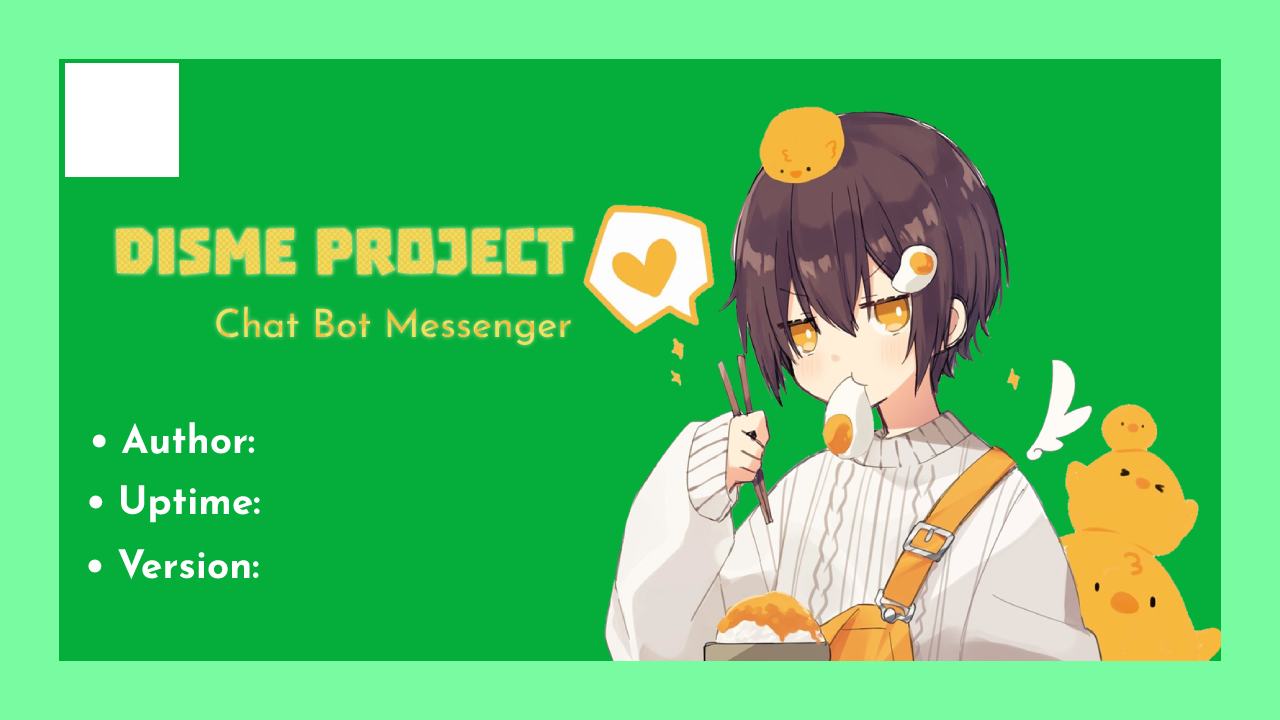
<style>
.page{position:relative;width:1280px;height:720px;background:#05ad3a}
.page>*{position:absolute;margin:0}
.t1{font:73px "Troika";color:#eed255}
.t2{font:39px "JosefinSans-Regular"}
.t3{font:39px "JosefinSans-Bold";color:#ffffff}
</style>
<div class="page">
<p class="t1" style="left:116px;top:227px;width:457px;height:49px">DISME PROJECT</p>
<p class="t2" style="left:216px;top:306px;width:355px;height:40px">Chat Bot Messenger</p>
<p class="t3" style="left:92px;top:422px;width:163px;height:32px">• Author:</p>
<p class="t3" style="left:89px;top:485px;width:171px;height:38px">• Uptime:</p>
<p class="t3" style="left:88px;top:549px;width:171px;height:31px">• Version:</p>
</div>
